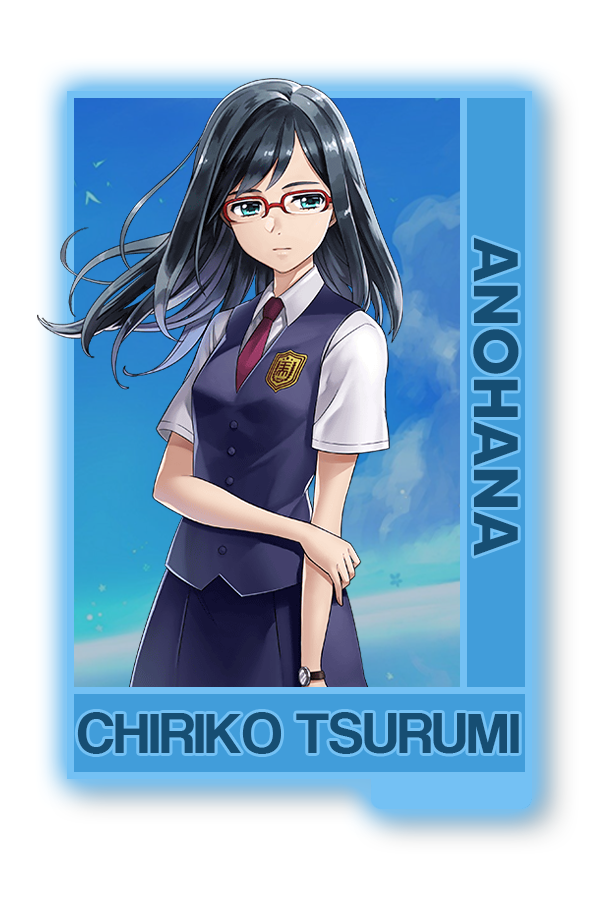
<style>
.page{position:relative;width:600px;height:900px;background:#ffffff}
.page>*{position:absolute;margin:0}
.t1{font:62.6px "MADETOMMY-Bold";color:#164e73}
.t2{font:59.7px "CoolveticaRg-Regular";color:#164e73}
</style>
<div class="page">
<p class="t1" style="left:473px;top:237px;width:46px;height:319px;rotate:90deg">ANOHANA</p>
<p class="t2" style="left:77px;top:712px;width:442px;height:42px">CHIRIKO TSURUMI</p>
</div>
